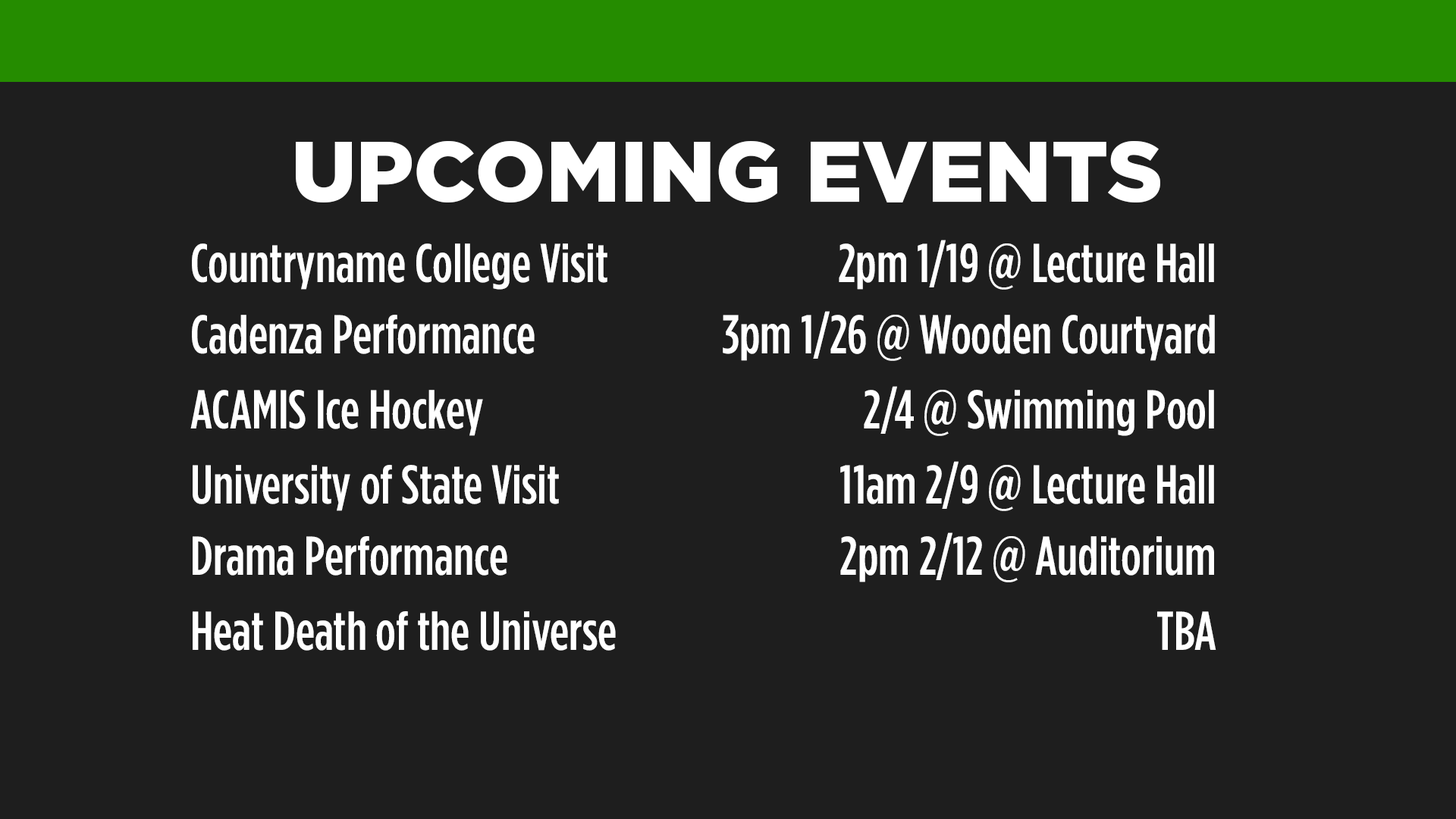
<style>
.page{position:relative;width:1456px;height:819px;background:#1e1e1e}
.page>*{position:absolute;margin:0}
.t1{font:85.7px "GothamBlack";color:#ffffff;font-variant:small-caps}
.t2{font:54.6px "GothamCondensed-Medium";color:#ffffff}
</style>
<div class="page">
<p class="t1" style="left:296px;top:141px;width:864px;height:62px">UPCOMING EVENTS</p>
<p class="t2" style="left:192px;top:243px;width:415px;height:47px">Countryname College Visit</p>
<p class="t2" style="left:839px;top:240px;width:375px;height:50px">2pm 1/19 @ Lecture Hall</p>
<p class="t2" style="left:192px;top:315px;width:343px;height:39px">Cadenza Performance</p>
<p class="t2" style="left:723px;top:311px;width:492px;height:50px">3pm 1/26 @ Wooden Courtyard</p>
<p class="t2" style="left:190px;top:390px;width:293px;height:46px">ACAMIS Ice Hockey</p>
<p class="t2" style="left:864px;top:386px;width:350px;height:50px">2/4 @ Swimming Pool</p>
<p class="t2" style="left:840px;top:461px;width:374px;height:50px">11am 2/9 @ Lecture Hall</p>
<p class="t2" style="left:193px;top:465px;width:366px;height:46px">University of State Visit</p>
<p class="t2" style="left:840px;top:532px;width:374px;height:50px">2pm 2/12 @ Auditorium</p>
<p class="t2" style="left:193px;top:536px;width:314px;height:40px">Drama Performance</p>
<p class="t2" style="left:193px;top:611px;width:423px;height:40px">Heat Death of the Universe</p>
<p class="t2" style="left:1157px;top:611px;width:59px;height:39px">TBA</p>
</div>
